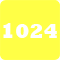
<style>
.page{position:relative;width:60px;height:60px;background:#ffff46}
.page>*{position:absolute;margin:0}
.t1{font:20.8px "Rockwell-ExtraBold";color:#ffffff}
</style>
<div class="page">
<p class="t1" style="left:3px;top:23px;width:54px;height:15px">1024</p>
</div>
